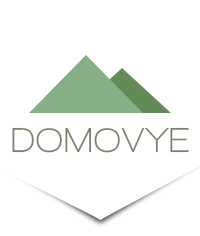
<style>
.page{position:relative;width:200px;height:236px;background:#ffffff}
.page>*{position:absolute;margin:0}
.t1{font:35.2px "WalkwayBold";letter-spacing:0.05em;color:#81806e;text-transform:uppercase}
</style>
<div class="page">
<p class="t1" style="left:12px;top:127px;width:177px;height:26px">domovye</p>
</div>
